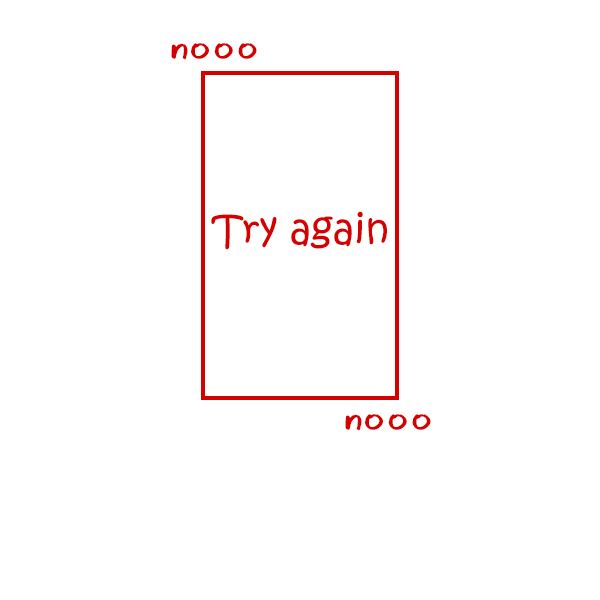
<style>
.page{position:relative;width:600px;height:600px;background:#ffffff}
.page>*{position:absolute;margin:0}
.t1{font:40px "EagerNaturalist";color:#d50000}
.t2{font:40px "KristenITC-Regular";color:#d50000}
</style>
<div class="page">
<p class="t1" style="left:171px;top:43px;width:86px;height:17px">nooo</p>
<p class="t2" style="left:211px;top:211px;width:176px;height:39px">Try again</p>
<p class="t1" style="left:345px;top:414px;width:86px;height:17px">nooo</p>
</div>
